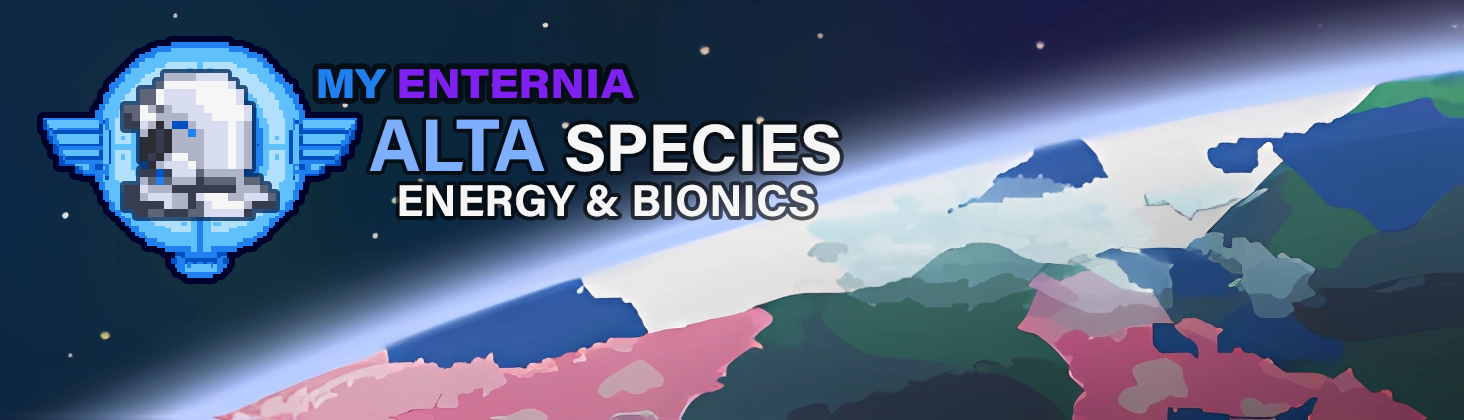
<style>
.page{position:relative;width:1464px;height:420px}
.page>*{position:absolute;margin:0}
.t1{font:40.9px "AcuminConcept_760.000wght_112.000wdth";color:#8020f0}
.t2{font:40.9px "AcuminConcept_760.000wght_112.000wdth";color:#2080f0}
.t3{font:44.7px/44.7px "AcuminConcept-Bold";color:#f6f6f6}
.t4{font:74.4px/44.7px "AcuminConcept-Bold";color:#7eafff}
.t5{font:67px/44.7px "AcuminConcept-Bold";color:#f6f6f6}
</style>
<div class="page">
<p class="t1" style="left:318px;top:69px;width:316px;height:29px"><span class="t2">MY </span>ENTERNIA</p>
<p class="t3" style="left:369px;top:119px;width:471px;height:98px;text-align:center"><span class="t4">ALTA </span><span class="t5">SPECIES<br></span>ENERGY &amp; BIONICS</p>
</div>
